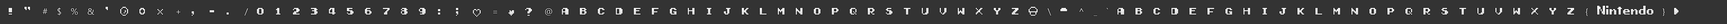
<style>
.page{position:relative;width:1727px;height:24px;background:#333333}
.page>*{position:absolute;margin:0}
.t1{font:9px "Early-GameBoy";color:#e5e5e5}
.t2{font:9px "Ebrima";color:#e5e5e5}
</style>
<div class="page">
<p class="t1" style="left:8px;top:6px;width:1671px;height:11px">!  "  <span class="t2">#  $  %  &amp;</span>  '  (  )  *  <span class="t2">+</span>  ,  -  .  <span class="t2">/</span>  0  1  2  3  4  5  6  7  8  9  :  ;  &lt;  <span class="t2">=</span>  &gt;  ?  <span class="t2">@</span>  A  B  C  D  E  F  G  H  I  J  K  L  M  N  O  P  Q  R  S  T  U  V  W  X  Y  Z  [  <span class="t2">\</span>  ]  <span class="t2">^  _  `</span>  a  b  c  d  e  f  g  h  i  j  k  l  m  n  o  p  q  r  s  t  u  v  w  x  y  z  <span class="t2">{</span>  |  <span class="t2">}</span>  ~</p>
</div>
